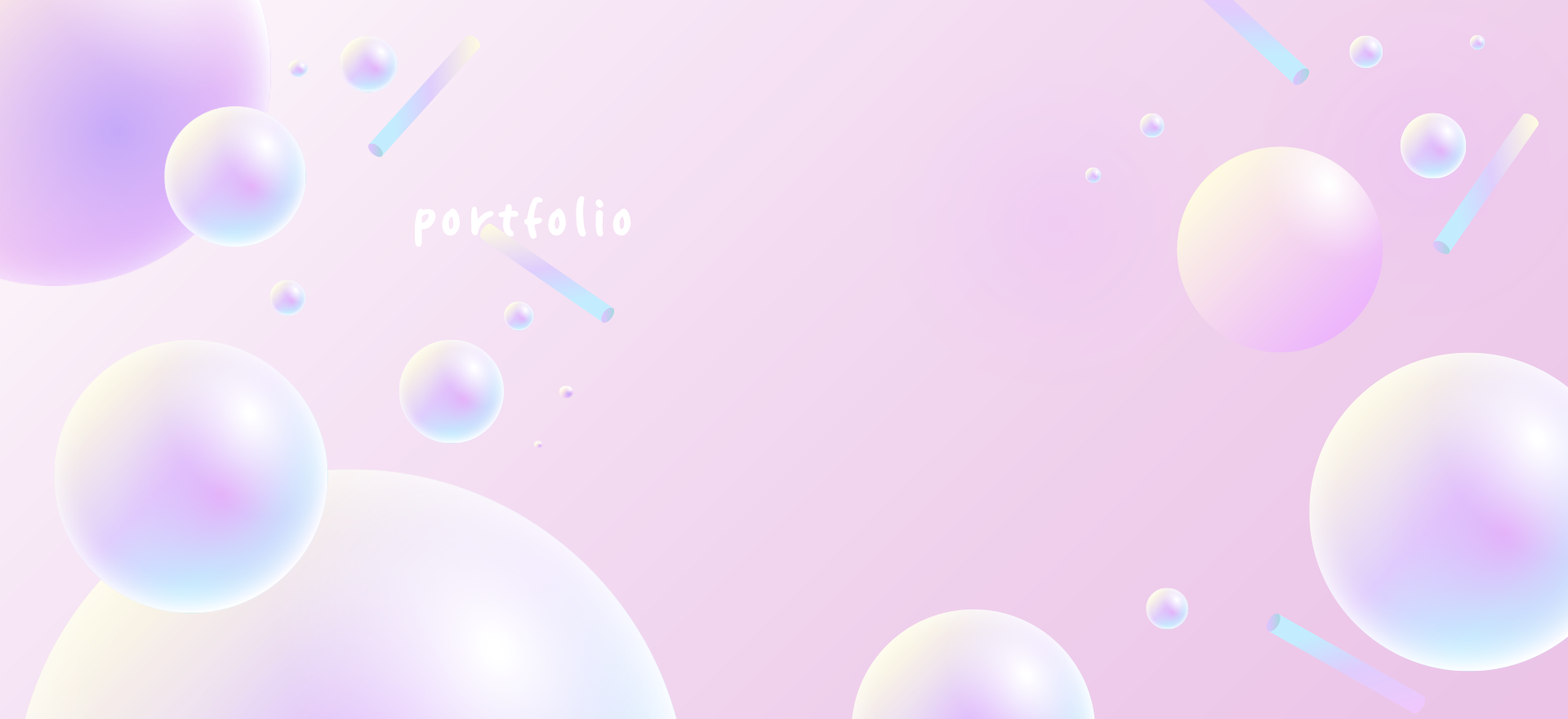
<style>
.page{position:relative;width:1568px;height:719px}
.page>*{position:absolute;margin:0}
.t1{font:89.4px "godoMaum";letter-spacing:0.045em;color:#ffffff}
</style>
<div class="page">
<p class="t1" style="left:415px;top:196px;width:216px;height:51px">portfolio</p>
</div>
